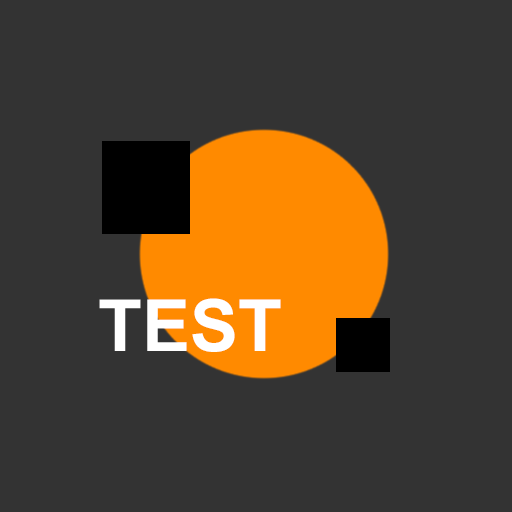
<style>
.page{position:relative;width:512px;height:512px;background:#333333}
.page>*{position:absolute;margin:0}
.t1{font:72px "Arial-BoldMT";color:#ffffff}
</style>
<div class="page">
<p class="t1" style="left:99px;top:298px;width:182px;height:54px">TEST</p>
</div>
